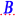
<style>
.page{position:relative;width:16px;height:16px;background:#ffffff}
.page>*{position:absolute;margin:0}
.t1{font:18.7px "FangSong_GB2312";color:#1200ff;text-transform:uppercase;font-weight:bold;font-style:italic}
.t2{font:8px "FangSong_GB2312";color:#ff001e;text-transform:uppercase;font-weight:bold;font-style:italic}
</style>
<div class="page">
<p class="t1" style="left:3px;top:0px;width:11px;height:14px">B</p>
<p class="t2" style="left:0px;top:13px;width:15px;height:3px">....</p>
</div>
